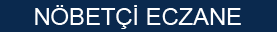
<style>
.page{position:relative;width:277px;height:32px;background:#0a294e}
.page>*{position:absolute;margin:0}
.t1{font:23.7px "ArialMT";color:#ffffff}
</style>
<div class="page">
<p class="t1" style="left:35px;top:5px;width:206px;height:24px">NÖBETÇİ ECZANE</p>
</div>
